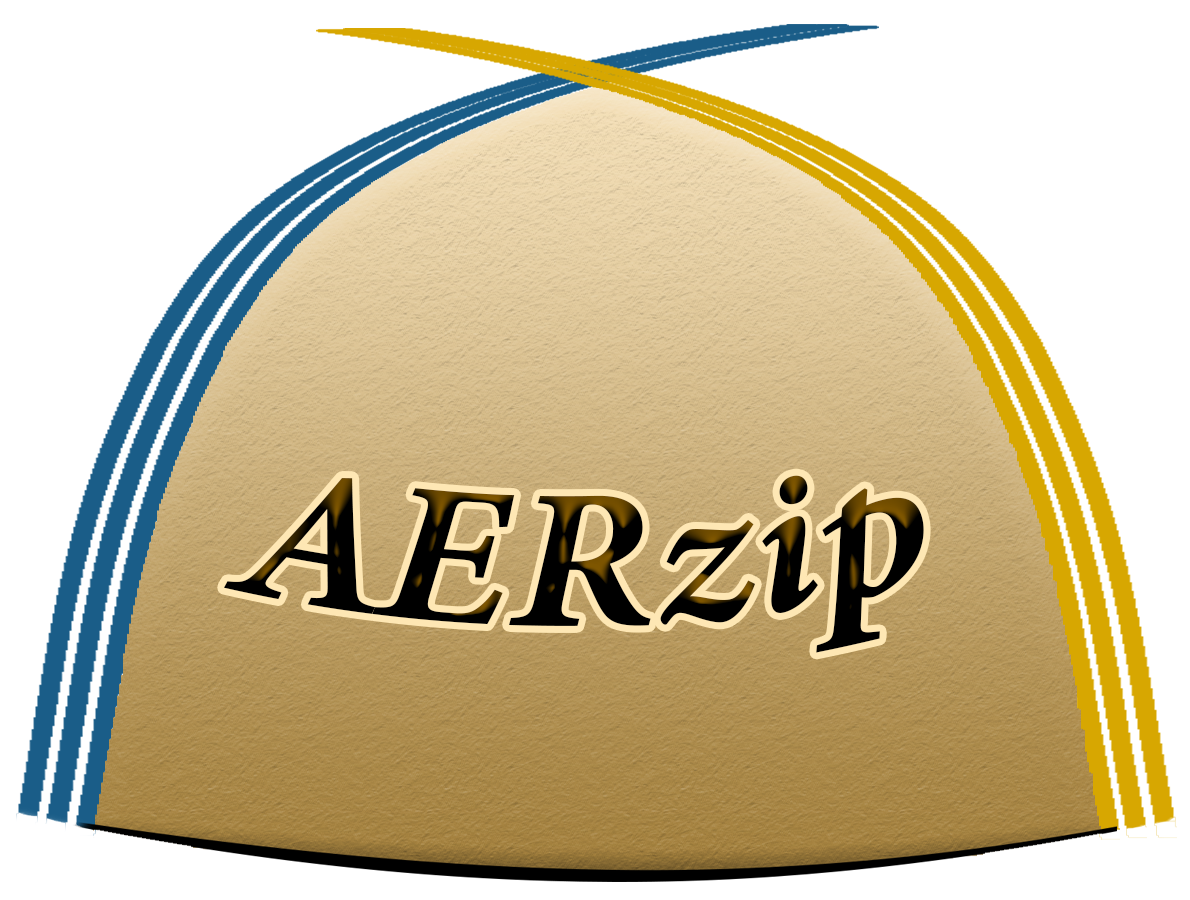
<style>
.page{position:relative;width:1190px;height:900px;background:#ffffff}
.page>*{position:absolute;margin:0}
.t1{font:200px "MinionConceptItalic-BoldItalic";color:#000000}
</style>
<div class="page">
<p class="t1" style="left:224px;top:475px;width:700px;height:178px;rotate:-1deg">AERzip</p>
</div>
